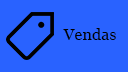
<style>
.page{position:relative;width:128px;height:72px;background:#2962ff}
.page>*{position:absolute;margin:0}
.t1{font:16.2px "Georgia";color:#000000}
</style>
<div class="page">
<p class="t1" style="left:63px;top:28px;width:53px;height:12px">Vendas</p>
</div>
